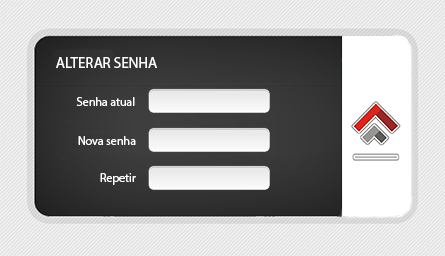
<style>
.page{position:relative;width:445px;height:256px}
.page>*{position:absolute;margin:0}
.t1{font:15px "MyriadPro-Regular";color:#ffffff}
.t2{font:12px "MyriadPro-Regular";color:#ffffff}
</style>
<div class="page">
<p class="t1" style="left:56px;top:57px;width:101px;height:11px">ALTERAR SENHA</p>
<p class="t2" style="left:76px;top:97px;width:59px;height:9px">Senha atual</p>
<p class="t2" style="left:78px;top:136px;width:58px;height:9px">Nova senha</p>
<p class="t2" style="left:100px;top:173px;width:36px;height:12px">Repetir</p>
</div>
